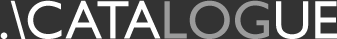
<style>
.page{position:relative;width:337px;height:39px;background:#333333}
.page>*{position:absolute;margin:0}
.t1{font:54.7px "GillSansMT";color:#ffffff;text-transform:uppercase}
.t2{font:54.7px "GillSansMT";color:#ffffff}
.t3{font:54.7px "GillSansMT";color:#9b9b9b;text-transform:uppercase}
</style>
<div class="page">
<p class="t1" style="left:0px;top:0px;width:337px;height:39px"><span class="t2">.\</span>cata<span class="t3">log</span>ue</p>
</div>
